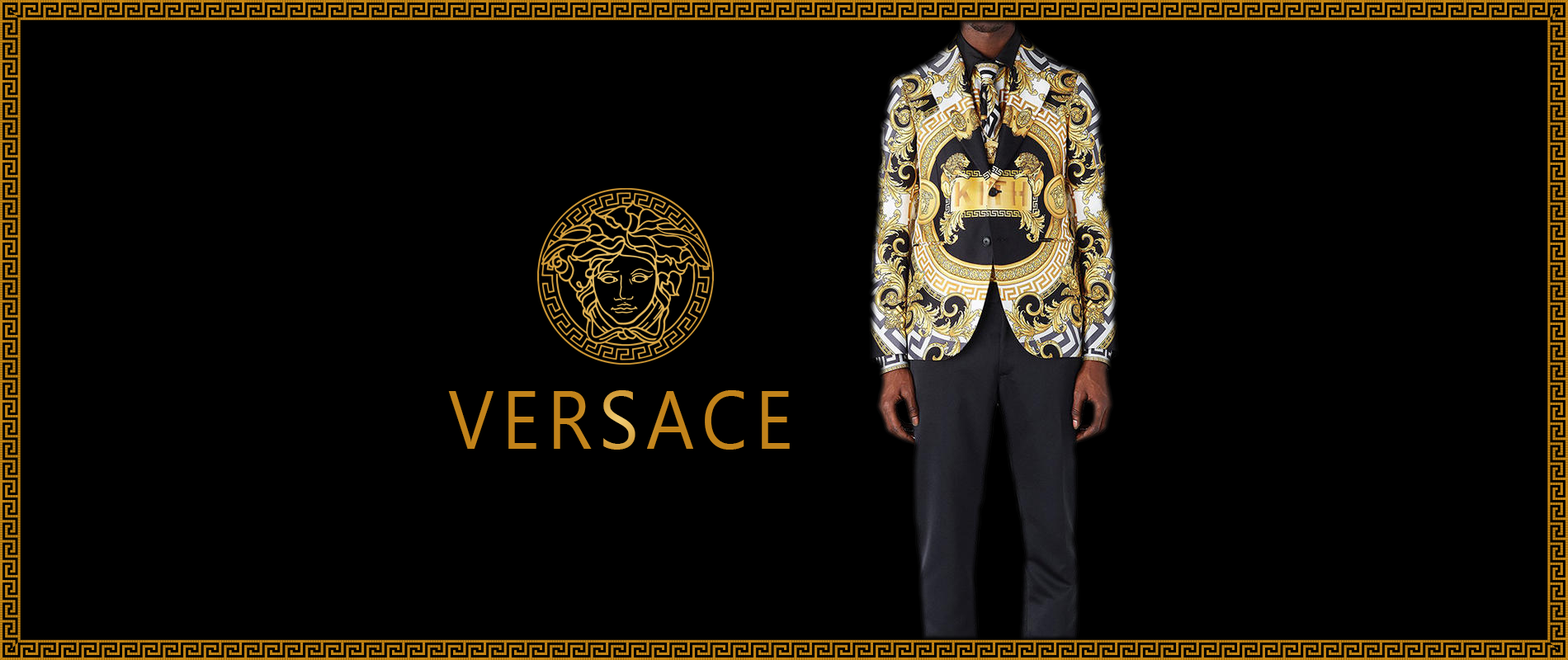
<style>
.page{position:relative;width:1568px;height:660px;background:#000000}
.page>*{position:absolute;margin:0}
.t1{font:82.8px "Gadugi";letter-spacing:0.1em;color:#c2831a;scale:0.9 1}
</style>
<div class="page">
<p class="t1" style="left:448px;top:390px;width:342px;height:60px">VERSACE</p>
</div>
